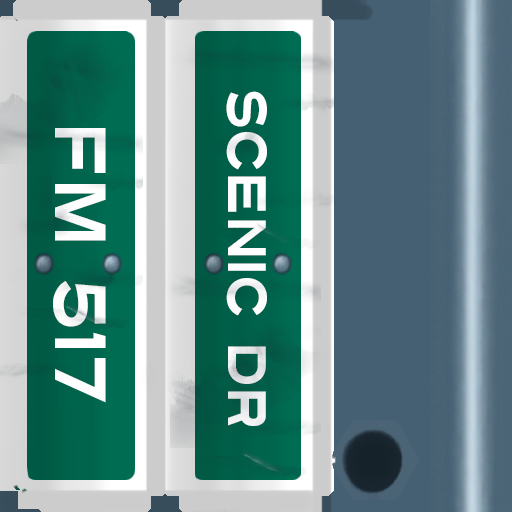
<style>
.page{position:relative;width:512px;height:512px}
.page>*{position:absolute;margin:0}
.t1{font:54px "Turnpike";color:#fefeff;scale:0.75 1}
.t2{font:72px "Turnpike";color:#fefeff;scale:0.75 1}
</style>
<div class="page">
<p class="t1" style="left:226px;top:91px;width:41px;height:335px;rotate:90deg">Scenic Dr</p>
<p class="t2" style="left:53px;top:128px;width:53px;height:275px;rotate:90deg">fm 517</p>
</div>
